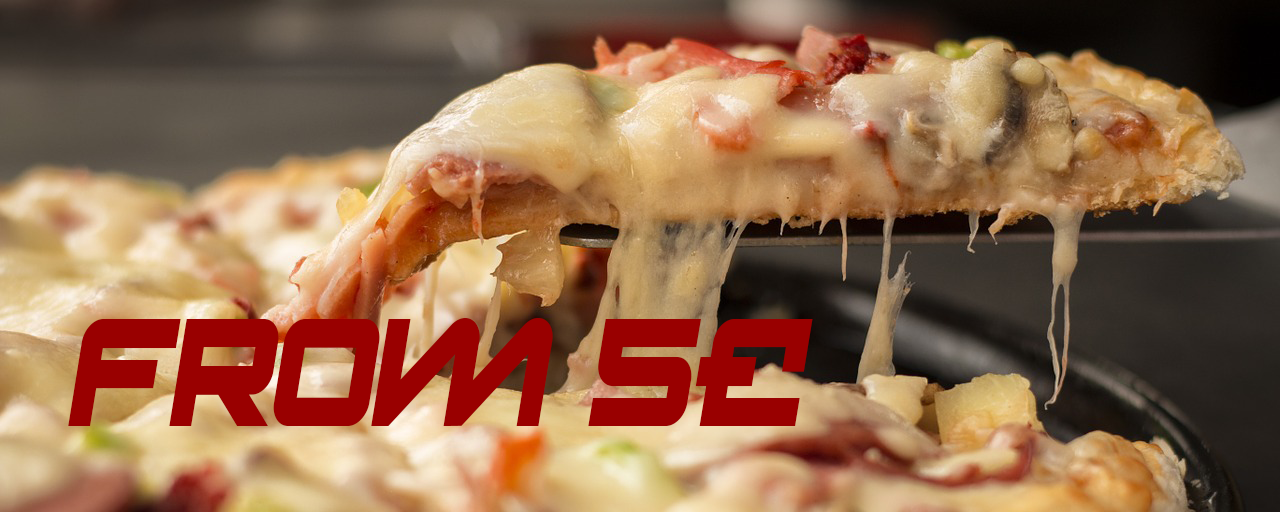
<style>
.page{position:relative;width:1280px;height:512px}
.page>*{position:absolute;margin:0}
.t1{font:150px "Onky-Italic";color:#990000;scale:0.77 1}
</style>
<div class="page">
<p class="t1" style="left:68px;top:318px;width:745px;height:108px">From 5£</p>
</div>
